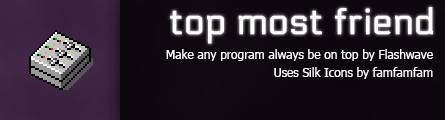
<style>
.page{position:relative;width:445px;height:120px}
.page>*{position:absolute;margin:0}
.t1{font:36px "Electrolize-Regular";color:#ffffff;font-weight:bold}
.t2{font:12px/18px "Tahoma";color:#ffffff}
</style>
<div class="page">
<p class="t1" style="left:170px;top:7px;width:263px;height:37px">top most friend</p>
<p class="t2" style="left:166px;top:49px;width:267px;height:30px;text-align:right">Make any program always be on top by Flashwave<br>Uses Silk Icons by famfamfam</p>
</div>
